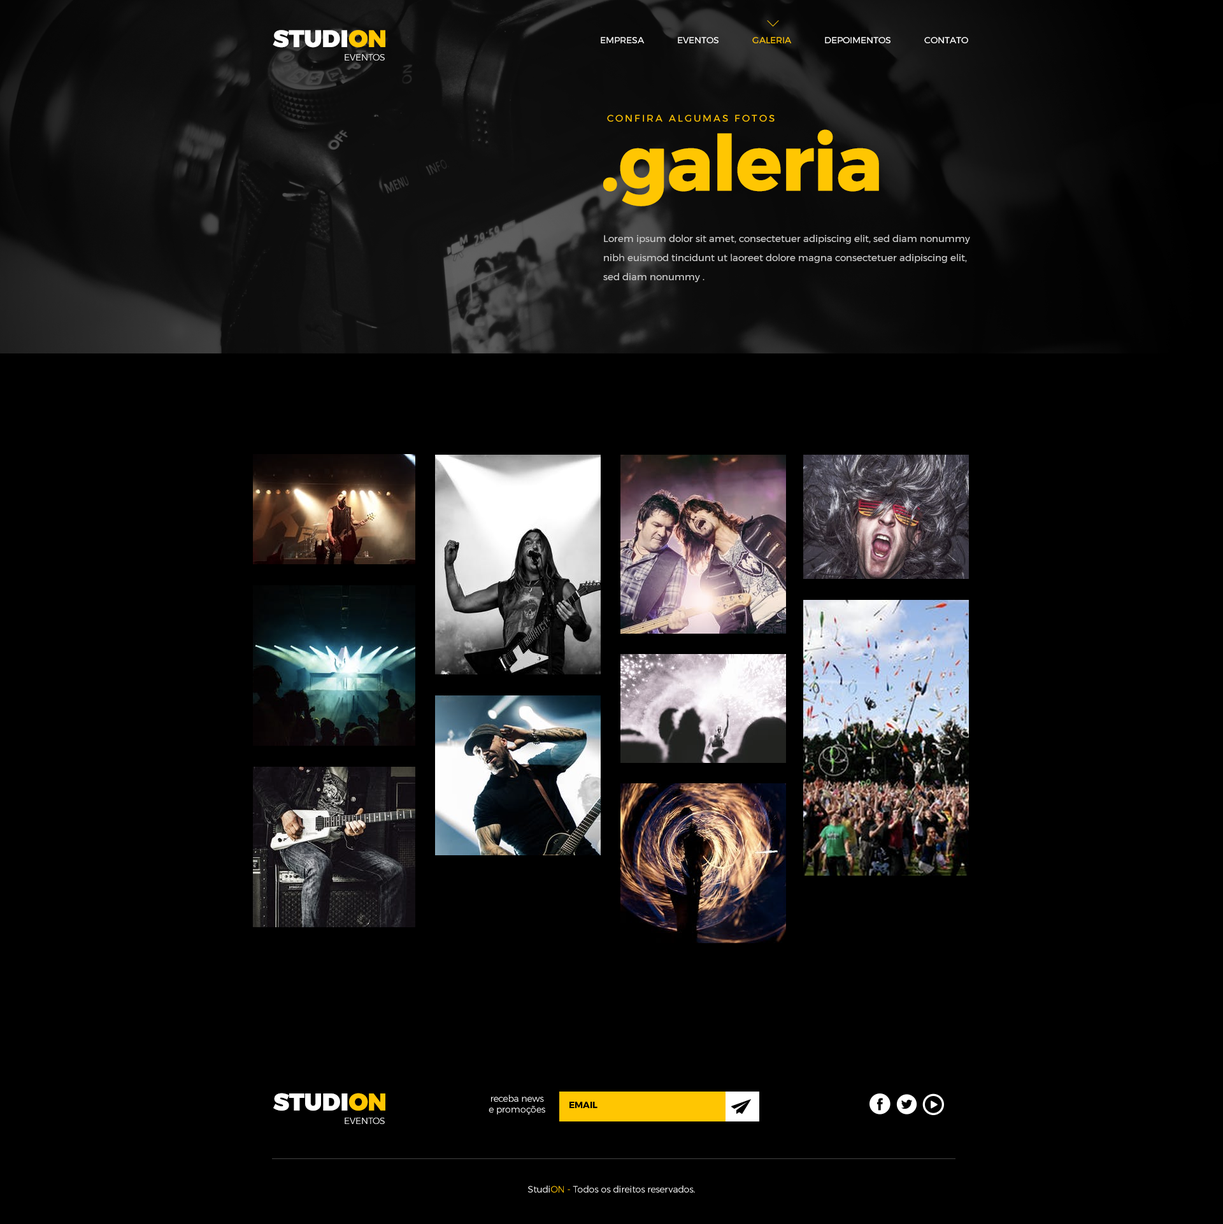
<style>
.page{position:relative;width:1223px;height:1224px;background:#000000}
.page>*{position:absolute;margin:0}
.t1{font:24.2px "Montserrat-Black";color:#ffffff}
.t2{font:24.2px "Montserrat-Black";color:#ffc602}
.t3{font:8.9px "Montserrat-Regular";color:#ffffff}
.t4{font:8.9px "Montserrat-Regular";color:#ffc602}
.t5{font:8.9px "Montserrat-Light";color:#ffffff}
.t6{font:9.6px "Montserrat-Regular";letter-spacing:0.2em;color:#ffc602}
.t7{font:76.4px "Montserrat-Bold";letter-spacing:-0.039em;color:#ffc602;font-weight:bold}
.t8{font:9.6px/19.1px "Montserrat-Regular";color:#cccccc}
.t9{font:24.4px "Montserrat-Black";color:#ffffff}
.t10{font:24.4px "Montserrat-Black";color:#ffc602}
.t11{font:9px/10.8px "Montserrat-Light";color:#ffffff}
.t12{font:9px "Montserrat-Bold";color:#000000}
.t13{font:9px "Montserrat-Light";color:#ffffff}
.t14{font:8.9px "Montserrat-Light";color:#ffc602}
</style>
<div class="page">
<p class="t1" style="left:273px;top:30px;width:112px;height:18px">STUDI<span class="t2">ON</span></p>
<p class="t3" style="left:601px;top:37px;width:367px;height:6px">EMPRESA             EVENTOS             <span class="t4">GALERIA</span>             DEPOIMENTOS             CONTATO</p>
<p class="t5" style="left:345px;top:54px;width:40px;height:7px">EVENTOS</p>
<p class="t6" style="left:607px;top:115px;width:167px;height:7px">CONFIRA ALGUMAS FOTOS</p>
<p class="t7" style="left:603px;top:129px;width:276px;height:77px">.galeria</p>
<p class="t8" style="left:603px;top:234px;width:367px;height:48px">Lorem ipsum dolor sit amet, consectetuer adipiscing elit, sed diam nonummy nibh euismod tincidunt ut laoreet dolore magna consectetuer adipiscing elit, sed diam nonummy .</p>
<p class="t9" style="left:273px;top:1093px;width:112px;height:18px">STUDI<span class="t10">ON</span></p>
<p class="t11" style="left:488px;top:1095px;width:57px;height:20px;text-align:center">receba news<br>e promoções</p>
<p class="t12" style="left:569px;top:1102px;width:28px;height:6px">EMAIL</p>
<p class="t13" style="left:345px;top:1118px;width:40px;height:6px">EVENTOS</p>
<p class="t5" style="left:528px;top:1185px;width:167px;height:8px">Studi<span class="t14">ON - </span>Todos os direitos reservados.</p>
</div>
